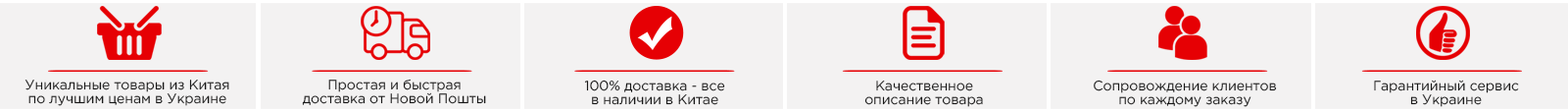
<style>
.page{position:relative;width:1568px;height:112px;background:#f3f2f2}
.page>*{position:absolute;margin:0}
.t1{font:13.6px/13.6px "GothamPro";color:#191919}
</style>
<div class="page">
<p class="t1" style="left:24px;top:79px;width:205px;height:27px;text-align:center">Уникальные товары из Китая <br>по лучшим ценам в Украине</p>
<p class="t1" style="left:302px;top:78px;width:184px;height:27px;text-align:center">Простая и быстрая доставка от Новой Пошты</p>
<p class="t1" style="left:584px;top:79px;width:141px;height:26px;text-align:center">100% доставка - все <br>в наличии в Китае</p>
<p class="t1" style="left:864px;top:80px;width:119px;height:27px;text-align:center">Качественное <br>описание товара</p>
<p class="t1" style="left:1094px;top:79px;width:183px;height:28px;text-align:center">Сопровождение клиентов по каждому заказу</p>
<p class="t1" style="left:1374px;top:79px;width:145px;height:28px;text-align:center">Гарантийный сервис<br>в Украине</p>
</div>
